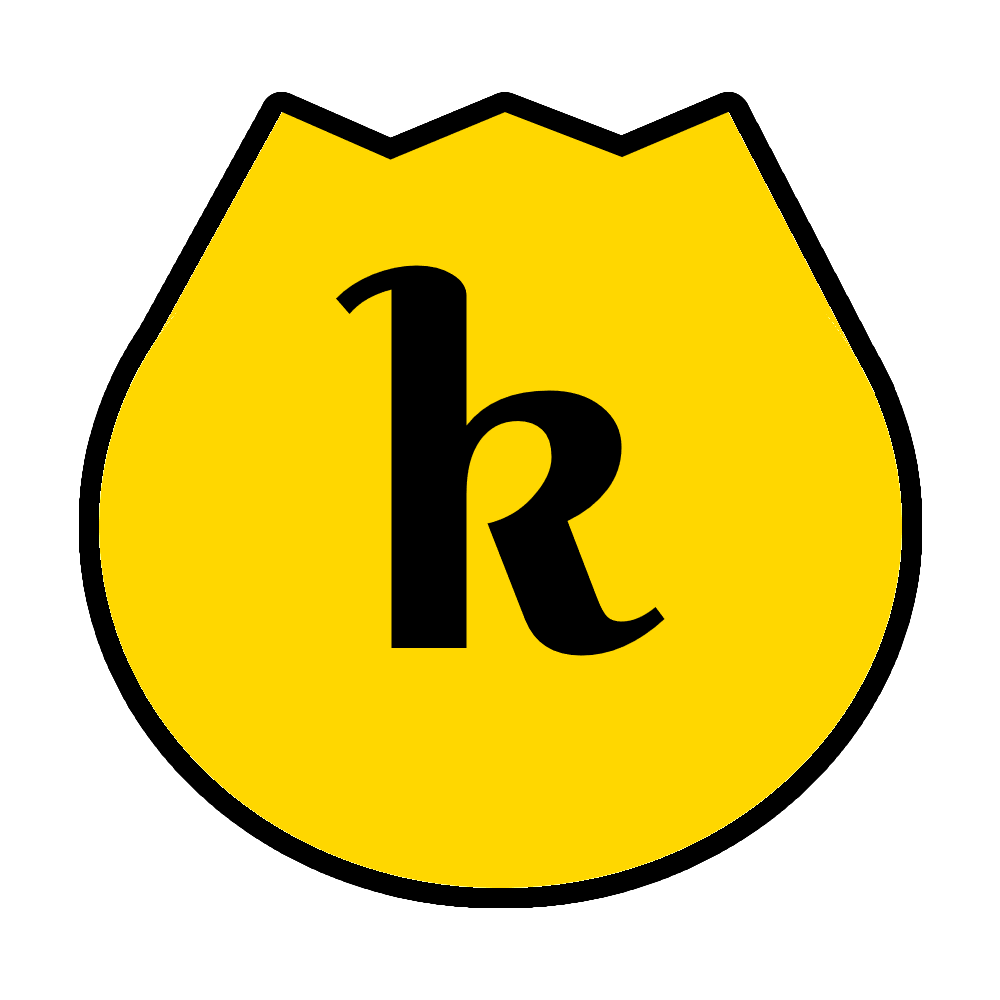
<style>
.page{position:relative;width:1000px;height:1000px;background:#ffffff}
.page>*{position:absolute;margin:0}
.t1{font:500px "CroissantOne-Regular";color:#000000}
</style>
<div class="page">
<p class="t1" style="left:336px;top:265px;width:329px;height:391px">k</p>
</div>
